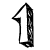
<style>
.page{position:relative;width:50px;height:50px;background:#ffffff}
.page>*{position:absolute;margin:0}
.t1{font:57.6px "Pointy";letter-spacing:-0.025em;color:#000000;scale:1.04 1}
</style>
<div class="page">
<p class="t1" style="left:11px;top:2px;width:23px;height:46px">1</p>
</div>
